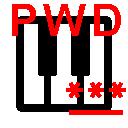
<style>
.page{position:relative;width:128px;height:128px;background:#ffffff}
.page>*{position:absolute;margin:0}
.t1{font:44.4px "Arial-BoldMT";letter-spacing:-0.075em;color:#ff0000}
</style>
<div class="page">
<p class="t1" style="left:12px;top:4px;width:109px;height:32px">P W D</p>
</div>
